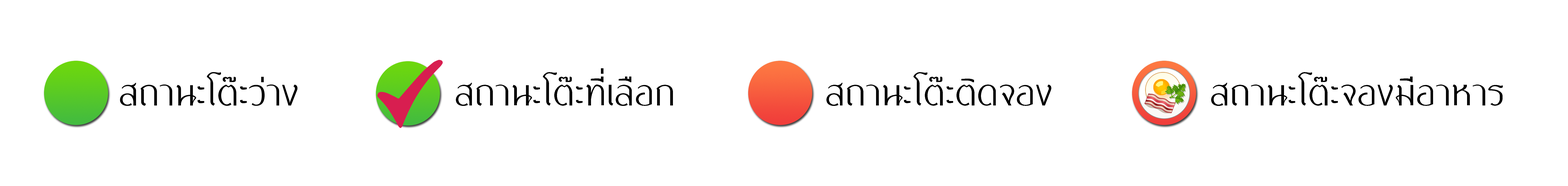
<style>
.page{position:relative;width:1568px;height:186px;background:#ffffff}
.page>*{position:absolute;margin:0}
.t1{font:38.5px "BSRUBANSOMDEJ-Regular";color:#000000}
</style>
<div class="page">
<p class="t1" style="left:120px;top:72px;width:178px;height:34px">สถานะโต๊ะว่าง</p>
<p class="t1" style="left:456px;top:68px;width:217px;height:38px">สถานะโต๊ะที่เลือก</p>
<p class="t1" style="left:826px;top:72px;width:225px;height:34px">สถานะโต๊ะติดจอง</p>
<p class="t1" style="left:1211px;top:72px;width:292px;height:34px">สถานะโต๊ะจองมีอาหาร</p>
</div>
